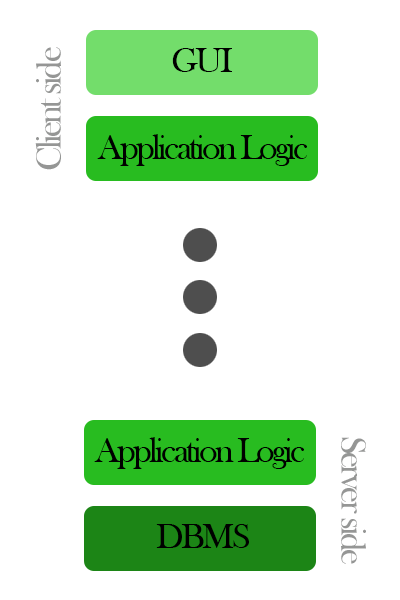
<style>
.page{position:relative;width:400px;height:600px;background:#ffffff}
.page>*{position:absolute;margin:0}
.t1{font:36px "BaskOldFace";letter-spacing:-0.075em;color:#959695}
.t2{font:36px "BaskOldFace";letter-spacing:-0.075em;color:#000000}
</style>
<div class="page">
<p class="t1" style="left:35px;top:47px;width:26px;height:123px;rotate:-90deg">Client side</p>
<p class="t2" style="left:172px;top:48px;width:60px;height:24px">GUI</p>
<p class="t2" style="left:97px;top:134px;width:210px;height:32px">Application Logic</p>
<p class="t2" style="left:94px;top:437px;width:210px;height:32px">Application Logic</p>
<p class="t1" style="left:341px;top:437px;width:25px;height:127px;rotate:90deg">Server side</p>
<p class="t2" style="left:156px;top:524px;width:93px;height:24px">DBMS</p>
</div>
